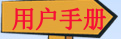
<style>
.page{position:relative;width:121px;height:39px}
.page>*{position:absolute;margin:0}
.t1{font:24px "SimSun";color:#f60f35;font-weight:bold}
.t2{font:24px "SimSun";color:#f60f35}
</style>
<div class="page">
<p class="t1" style="left:12px;top:7px;width:94px;height:24px">用户手册<span class="t2">册</span></p>
</div>
